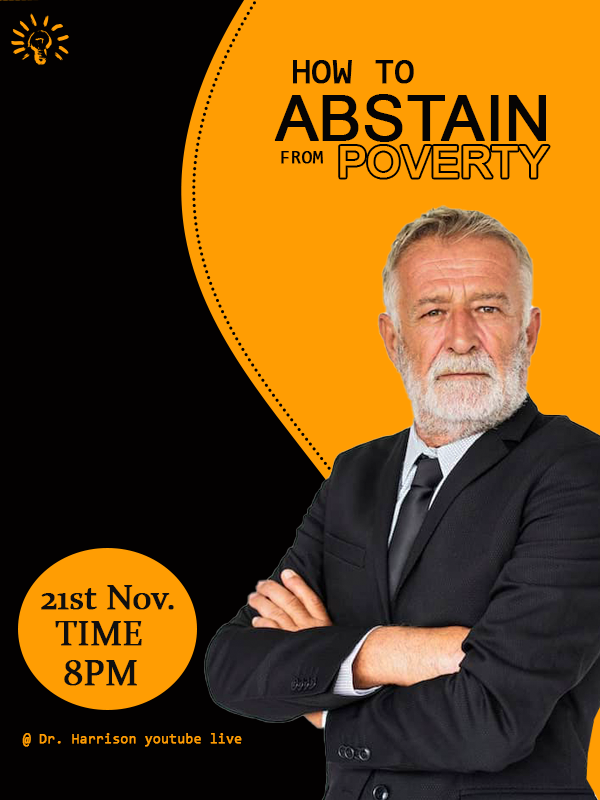
<style>
.page{position:relative;width:600px;height:800px;background:#030101}
.page>*{position:absolute;margin:0}
.t1{font:36px "Consolas";color:#060404;font-weight:bold}
.t2{font:63px "ArialMT";color:#060404;font-weight:bold}
.t3{font:42.8px "ArialMT";color:#ff9d03;font-weight:bold}
.t4{font:19px "Consolas";color:#000000;font-weight:bold}
.t5{font:34.6px "Constantia";color:#0f0f0f;font-weight:bold}
.t6{font:35px "Constantia";color:#0f0f0f;font-weight:bold}
.t7{font:36.2px "Constantia";color:#0f0f0f;font-weight:bold}
.t8{font:14.1px "Consolas";color:#ff9d03;font-weight:bold}
</style>
<div class="page">
<p class="t1" style="left:293px;top:60px;width:121px;height:24px">HOW TO</p>
<p class="t2" style="left:274px;top:94px;width:272px;height:48px">ABSTAIN</p>
<p class="t3" style="left:340px;top:146px;width:209px;height:32px">POVERTY</p>
<p class="t4" style="left:281px;top:151px;width:42px;height:13px">FROM</p>
<p class="t5" style="left:41px;top:585px;width:133px;height:25px">21st Nov.</p>
<p class="t6" style="left:55px;top:621px;width:87px;height:25px">TIME</p>
<p class="t7" style="left:64px;top:660px;width:73px;height:26px">8PM</p>
<p class="t8" style="left:22px;top:733px;width:220px;height:14px">@ Dr. Harrison youtube live</p>
</div>
